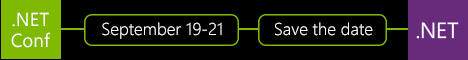
<style>
.page{position:relative;width:468px;height:60px;background:#000000}
.page>*{position:absolute;margin:0}
.t1{font:18.7px/20.7px "SegoeUI";color:#ffffff}
.t2{font:17px "SegoeUI-Semilight";color:#ffffff}
</style>
<div class="page">
<p class="t1" style="left:11px;top:12px;width:39px;height:36px;text-align:center">.NET<br>Conf</p>
<p class="t2" style="left:102px;top:22px;width:120px;height:17px">September 19-21</p>
<p class="t2" style="left:275px;top:22px;width:98px;height:14px">Save the date</p>
</div>
